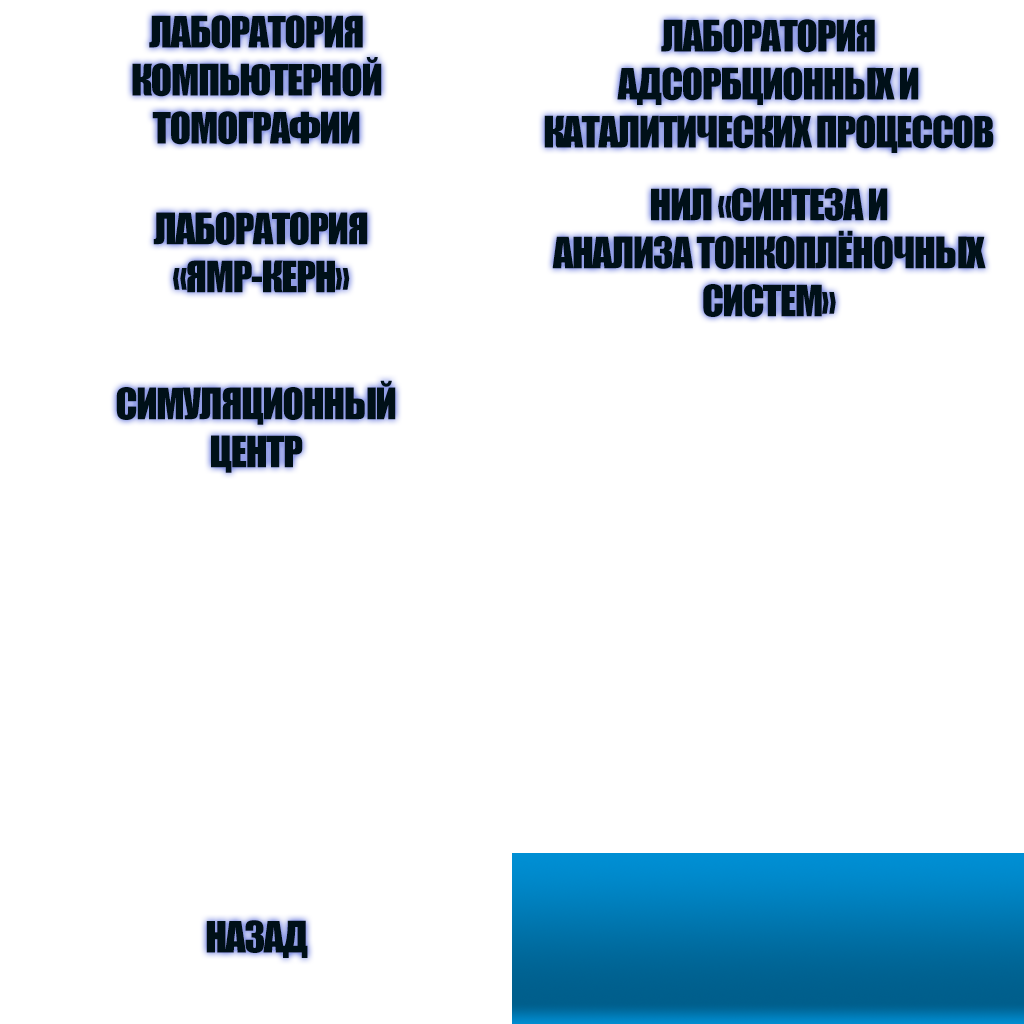
<style>
.page{position:relative;width:1024px;height:1024px;background:#ffffff}
.page>*{position:absolute;margin:0}
.t1{font:40px "Impact";letter-spacing:-0.04em;color:#001018}
</style>
<div class="page">
<p class="t1" style="left:132px;top:15px;width:250px;height:130px;text-align:center">ЛАБОРАТОРИЯ<br>КОМПЬЮТЕРНОЙ<br>ТОМОГРАФИИ</p>
<p class="t1" style="left:544px;top:19px;width:450px;height:134px;text-align:center">ЛАБОРАТОРИЯ<br>АДСОРБЦИОННЫХ И<br>КАТАЛИТИЧЕСКИХ ПРОЦЕССОВ</p>
<p class="t1" style="left:552px;top:188px;width:434px;height:129px;text-align:center">НИЛ «СИНТЕЗА И<br>АНАЛИЗА ТОНКОПЛЁНОЧНЫХ<br>СИСТЕМ»</p>
<p class="t1" style="left:153px;top:212px;width:215px;height:81px;text-align:center">ЛАБОРАТОРИЯ<br>«ЯМР-КЕРН»</p>
<p class="t1" style="left:116px;top:380px;width:280px;height:93px;text-align:center">СИМУЛЯЦИОННЫЙ<br>ЦЕНТР</p>
<p class="t1" style="left:206px;top:920px;width:102px;height:38px">НАЗАД</p>
</div>
